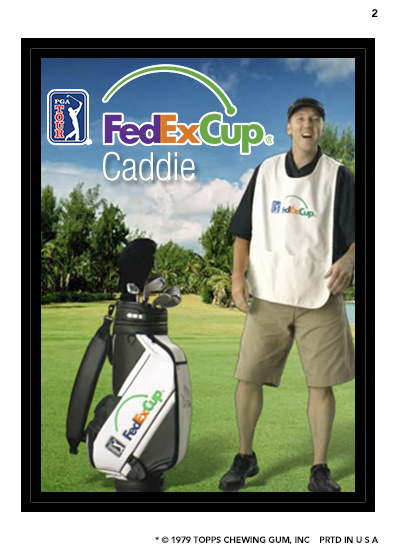
<style>
.page{position:relative;width:394px;height:554px;background:#ffffff}
.page>*{position:absolute;margin:0}
.t1{font:11.1px "Avenir-Black";letter-spacing:-0.025em;color:#000000}
.t2{font:38.9px "HelveticaNeueLTStd-LtCn";color:#fefefe}
.t3{font:8.9px "Avenir-Black";letter-spacing:-0.025em;color:#000000}
</style>
<div class="page">
<p class="t1" style="left:372px;top:9px;width:6px;height:8px">2</p>
<p class="t2" style="left:103px;top:151px;width:92px;height:30px">Caddie</p>
<p class="t3" style="left:155px;top:536px;width:224px;height:8px">* © 1979 TOPPS CHEWING GUM, INC    PRTD IN U S A</p>
</div>
